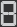
<style>
.page{position:relative;width:17px;height:27px;background:#333333}
.page>*{position:absolute;margin:0}
.t1{font:32px "DigitalCounter7";letter-spacing:0.075em;color:#cfd0d1;text-transform:uppercase}
</style>
<div class="page">
<p class="t1" style="left:0px;top:1px;width:17px;height:25px">8</p>
</div>
